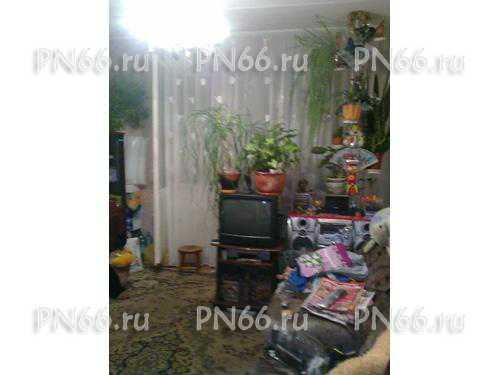
<style>
.page{position:relative;width:500px;height:375px;background:#ffffff}
.page>*{position:absolute;margin:0}
.t1{font:32px "TempusSansITC";letter-spacing:0.04em;color:#8a867e}
</style>
<div class="page">
<p class="t1" style="left:197px;top:306px;width:110px;height:24px">PN66.ru</p>
</div>
